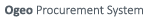
<style>
.page{position:relative;width:148px;height:19px;background:#ffffff}
.page>*{position:absolute;margin:0}
.t1{font:13px "Calibri-Light";color:#525c65}
.t2{font:13px "Calibri-Bold";color:#525c65}
</style>
<div class="page">
<p class="t1" style="left:5px;top:5px;width:138px;height:12px"><span class="t2">Ogeo </span>Procurement System</p>
</div>
